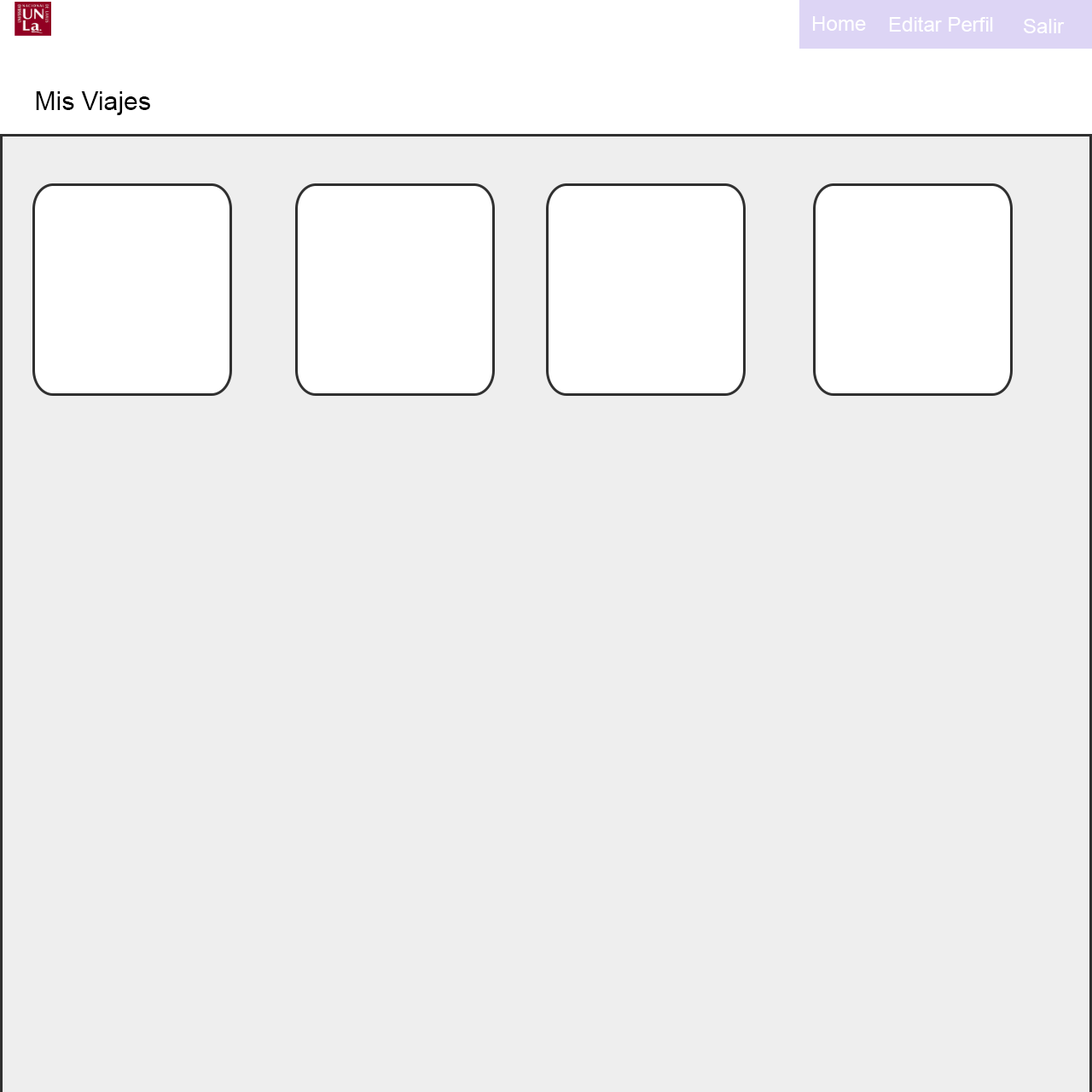
<style>
.page{position:relative;width:1092px;height:1092px;background:#eeeeee}
.page>*{position:absolute;margin:0}
.t1{font:20.5px "ArialMT";color:#ffffff}
.t2{font:25.6px "ArialMT";color:#000000}
</style>
<div class="page">
<p class="t1" style="left:812px;top:16px;width:54px;height:15px">Home</p>
<p class="t1" style="left:889px;top:16px;width:104px;height:16px">Editar Perfil</p>
<p class="t1" style="left:1024px;top:19px;width:41px;height:14px">Salir</p>
<p class="t2" style="left:36px;top:91px;width:114px;height:24px">Mis Viajes</p>
</div>
